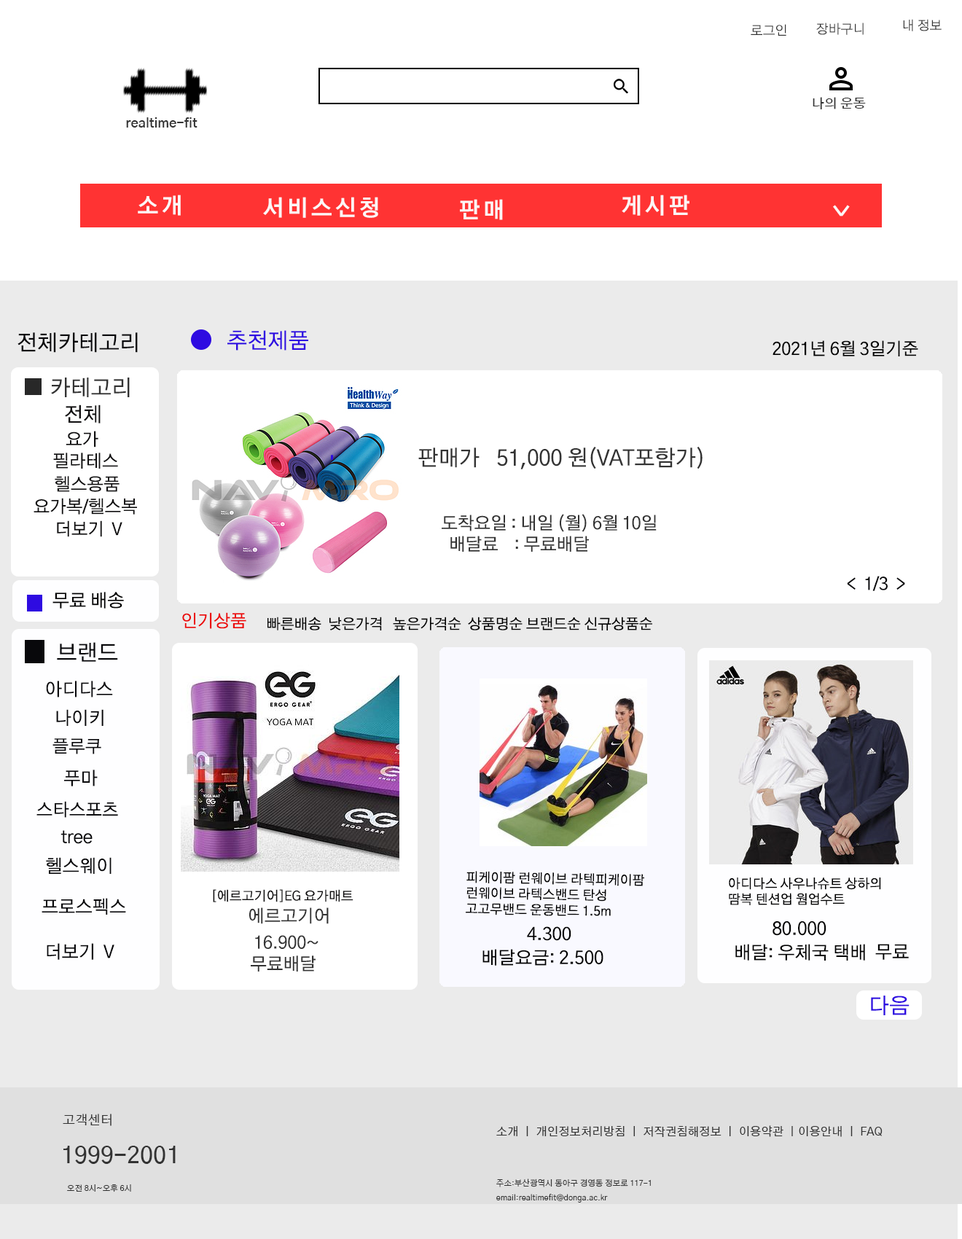
<style>
.page{position:relative;width:962px;height:1239px;background:#ffffff}
.page>*{position:absolute;margin:0}
.t1{font:13.1px "GothicA1-Regular";letter-spacing:-0.02em;color:#333333}
.t2{font:13.1px "GothicA1-Medium";color:#333333}
.t3{font:13.1px "GothicA1-SemiBold";color:#333333}
.t4{font:21.9px "GothicA1-Bold";letter-spacing:0.1em;color:#fcf6f6}
.t5{font:21.9px "GothicA1-Regular";letter-spacing:-0.02em;color:#08080b}
.t6{font:21.9px "GothicA1-Regular";letter-spacing:-0.02em;color:#2e0be1}
.t7{font:17.5px "GothicA1-Regular";letter-spacing:-0.02em;color:#000000}
.t8{font:21.9px "GothicA1-Regular";letter-spacing:-0.02em;color:#333333}
.t9{font:20.4px "GothicA1-Regular";letter-spacing:-0.02em;color:#100f10}
.t10{font:17.5px "GothicA1-Regular";letter-spacing:-0.02em;color:#100f10}
.t11{font:17.5px "GothicA1-Regular";letter-spacing:-0.02em;color:#333333}
.t12{font:17.5px "GothicA1-Regular";letter-spacing:-0.02em;color:#08080b}
.t13{font:18.1px "GothicA1-Regular";letter-spacing:-0.02em;color:#000000}
.t14{font:17.5px "GothicA1-Regular";letter-spacing:-0.02em;color:#eb0909}
.t15{font:14.6px "GothicA1-Regular";letter-spacing:-0.02em;color:#000000}
.t16{font:18.1px "GothicA1-Regular";letter-spacing:-0.02em;color:#08080b}
.t17{font:21.9px "GothicA1-Regular";letter-spacing:-0.02em;color:#000000}
.t18{font:13.1px "GothicA1-Regular";letter-spacing:-0.02em;color:#000000}
.t19{font:13.1px "GothicA1-Regular";letter-spacing:-0.02em;color:#100f10}
.t20{font:17.5px "GothicA1-Regular";letter-spacing:-0.02em;color:#000000;scale:1.03 1}
.t21{font:13.1px "GothicA1-Regular";color:#333333}
.t22{font:11.7px "GothicA1-Regular";color:#333333}
.t23{font:23.3px "GothicA1-Medium";color:#333333}
.t24{font:8px/14.6px "GothicA1-Regular";color:#333333}
.t25{font:8px "GothicA1-Regular";color:#333333}
</style>
<div class="page">
<p class="t1" style="left:751px;top:24px;width:36px;height:12px">로그인</p>
<p class="t1" style="left:816px;top:23px;width:48px;height:12px">장바구니</p>
<p class="t1" style="left:903px;top:19px;width:39px;height:12px">내 정보</p>
<p class="t2" style="left:813px;top:97px;width:53px;height:12px">나의 운동</p>
<p class="t3" style="left:126px;top:117px;width:72px;height:11px">realtime-fit</p>
<p class="t4" style="left:138px;top:195px;width:43px;height:21px">소개</p>
<p class="t4" style="left:263px;top:197px;width:115px;height:21px">서비스신청</p>
<p class="t4" style="left:622px;top:195px;width:68px;height:21px">게시판</p>
<p class="t4" style="left:460px;top:199px;width:43px;height:21px">판매</p>
<p class="t4" style="left:833px;top:205px;width:17px;height:12px;rotate:90deg">&gt;</p>
<p class="t5" style="left:17px;top:332px;width:121px;height:21px">전체카테고리</p>
<p class="t6" style="left:227px;top:330px;width:81px;height:21px">추천제품</p>
<p class="t7" style="left:773px;top:340px;width:145px;height:16px">2021년 6월 3일기준</p>
<p class="t8" style="left:51px;top:378px;width:79px;height:19px">카테고리</p>
<p class="t9" style="left:65px;top:405px;width:36px;height:19px">전체</p>
<p class="t10" style="left:66px;top:431px;width:32px;height:17px">요가</p>
<p class="t8" style="left:418px;top:447px;width:285px;height:22px">판매가 51,000 원(VAT포함가)</p>
<p class="t10" style="left:53px;top:453px;width:65px;height:16px">필라테스</p>
<p class="t10" style="left:55px;top:476px;width:65px;height:16px">헬스용품</p>
<p class="t10" style="left:34px;top:498px;width:103px;height:17px">요가복/헬스복</p>
<p class="t10" style="left:57px;top:520px;width:65px;height:17px">더보기  V</p>
<p class="t11" style="left:442px;top:514px;width:215px;height:38px">도착요일 : 내일 (월) 6월 10일 <br>  배달료    : 무료배달</p>
<p class="t12" style="left:847px;top:576px;width:58px;height:15px">&lt;  1/3  &gt;</p>
<p class="t13" style="left:52px;top:592px;width:72px;height:17px">무료 배송</p>
<p class="t14" style="left:182px;top:612px;width:64px;height:17px">인기상품</p>
<p class="t15" style="left:268px;top:617px;width:384px;height:14px">빠른배송  낮은가격   높은가격순  상품명순 브랜드순 신규상품순</p>
<p class="t5" style="left:57px;top:642px;width:61px;height:20px">브랜드</p>
<p class="t16" style="left:46px;top:681px;width:67px;height:17px">아디다스</p>
<p class="t16" style="left:56px;top:709px;width:48px;height:17px">나이키</p>
<p class="t12" style="left:52px;top:738px;width:49px;height:16px">플루쿠</p>
<p class="t16" style="left:64px;top:770px;width:34px;height:17px">푸마</p>
<p class="t12" style="left:36px;top:801px;width:82px;height:17px">스타스포츠</p>
<p class="t16" style="left:61px;top:830px;width:32px;height:14px">tree</p>
<p class="t16" style="left:46px;top:857px;width:66px;height:17px">헬스웨이</p>
<p class="t17" style="left:466px;top:871px;width:178px;height:45px;rotate:1deg"><span class="t18">피케이팜 런웨이브 라텍피케이팜 런웨이브 라텍스밴드 탄성 고고무밴드 운동밴드 1.5m<br></span>피케이팜 런웨이브 라텍스밴드 탄성 고무밴드 운동밴드 1.5m<br>스밴드 탄성 고무밴드 운동밴드 1.5m</p>
<p class="t18" style="left:729px;top:878px;width:152px;height:27px">아디다스 사우나슈트 상하의 땀복 텐션업 웜업수트</p>
<p class="t19" style="left:213px;top:889px;width:141px;height:13px">[에르고기어]EG 요가매트</p>
<p class="t16" style="left:42px;top:898px;width:84px;height:17px">프로스펙스</p>
<p class="t11" style="left:249px;top:908px;width:80px;height:16px">에르고기어</p>
<p class="t20" style="left:527px;top:927px;width:45px;height:14px">4.300</p>
<p class="t13" style="left:773px;top:921px;width:54px;height:15px">80.000</p>
<p class="t11" style="left:255px;top:935px;width:64px;height:14px">16.900~</p>
<p class="t16" style="left:47px;top:943px;width:67px;height:17px">더보기  V</p>
<p class="t13" style="left:483px;top:949px;width:121px;height:17px">배달요금: 2.500</p>
<p class="t13" style="left:736px;top:944px;width:129px;height:17px">배달: 우체국 택배</p>
<p class="t13" style="left:875px;top:944px;width:34px;height:16px">무료</p>
<p class="t11" style="left:251px;top:956px;width:65px;height:16px">무료배달</p>
<p class="t6" style="left:871px;top:996px;width:39px;height:19px">다음</p>
<p class="t21" style="left:63px;top:1114px;width:49px;height:12px">고객센터</p>
<p class="t22" style="left:496px;top:1126px;width:387px;height:11px">소개 ㅣ 개인정보처리방침 ㅣ 저작권침해정보 ㅣ 이용약관 ㅣ이용안내 ㅣ FAQ</p>
<p class="t23" style="left:63px;top:1146px;width:113px;height:18px">1999-2001</p>
<p class="t24" style="left:496px;top:1179px;width:155px;height:24px">주소:부산광역시 동아구 경영동 정보로 117-1<br>email:realtimefit@donga.ac.kr</p>
<p class="t25" style="left:67px;top:1185px;width:64px;height:8px">오전 8시~오후 6시</p>
</div>
